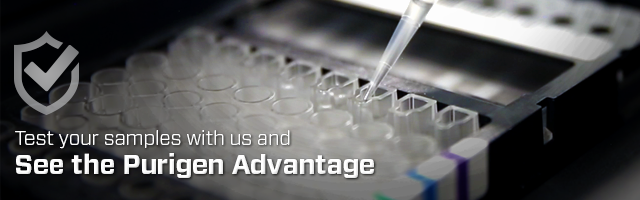
<style>
.page{position:relative;width:640px;height:200px}
.page>*{position:absolute;margin:0}
.t1{font:20.4px/29px "Forza-Light";letter-spacing:0.005em;color:#fefefe}
.t2{font:27.5px/29px "Forza-Bold";letter-spacing:0.005em;color:#fefefe}
</style>
<div class="page">
<p class="t1" style="left:15px;top:130px;width:359px;height:48px">Test your samples with us and<br><span class="t2">See the Purigen Advantage</span></p>
</div>
